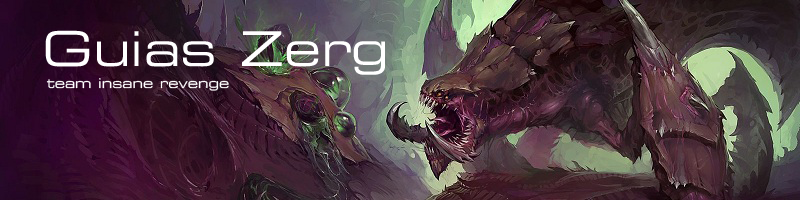
<style>
.page{position:relative;width:800px;height:200px}
.page>*{position:absolute;margin:0}
.t1{font:48px "ESL-eSport-Ext-Light";color:#ffffff}
.t2{font:13.3px "ESL-eSport-Ext-Light";color:#ffffff}
</style>
<div class="page">
<p class="t1" style="left:45px;top:30px;width:340px;height:45px">Guias Zerg</p>
<p class="t2" style="left:46px;top:78px;width:183px;height:13px">team insane revenge</p>
</div>
